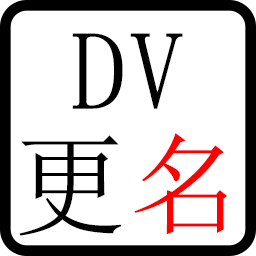
<style>
.page{position:relative;width:256px;height:256px;background:#ffffff}
.page>*{position:absolute;margin:0}
.t1{font:112px/114.7px "NSimSun";color:#000000;font-weight:bold}
.t2{font:112px/114.7px "NSimSun";color:#ff0000;font-weight:bold}
</style>
<div class="page">
<p class="t1" style="left:19px;top:33px;width:208px;height:203px;text-align:center">DV<br>更<span class="t2">名</span></p>
</div>
